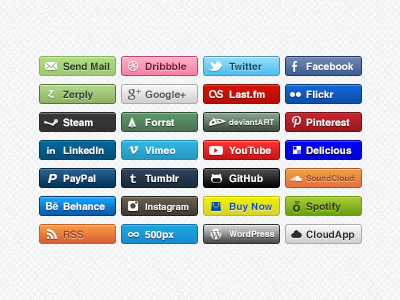
<style>
.page{position:relative;width:400px;height:300px}
.page>*{position:absolute;margin:0}
.t1{font:10px "Helvetica-Bold";color:#2a351d}
.t2{font:10px "Helvetica-Bold";letter-spacing:0.01em;color:#73102e}
.t3{font:10px "Helvetica-Bold";letter-spacing:0.01em;color:#064c68}
.t4{font:10px "Helvetica-Bold";letter-spacing:0.01em;color:#ffffff}
.t5{font:10px "Helvetica-Bold";color:#363d2d}
.t6{font:10px "Helvetica-Bold";letter-spacing:0.01em;color:#555555}
.t7{font:10px "Helvetica-Bold";color:#ffffff}
.t8{font:8px "Helvetica-Bold";letter-spacing:0.01em;color:#fefefe}
.t9{font:10px "Helvetica-Bold";letter-spacing:0.01em;color:#fefefe}
.t10{font:8px "Helvetica-Bold";letter-spacing:0.01em;color:#883f21}
.t11{font:9px "Helvetica-Bold";letter-spacing:0.01em;color:#ffffff}
.t12{font:10px "Helvetica-Bold";letter-spacing:0.01em;color:#0c4fa7}
.t13{font:10px "Helvetica-Bold";letter-spacing:0.01em;color:#2a351d}
.t14{font:10px "Helvetica-Bold";color:#a24a1d}
.t15{font:8.5px "Helvetica-Bold";letter-spacing:0.01em;color:#ffffff}
.t16{font:10px "Helvetica-Bold";letter-spacing:0.01em;color:#2c2c2c}
</style>
<div class="page">
<p class="t1" style="left:63px;top:62px;width:47px;height:9px">Send Mail</p>
<p class="t2" style="left:145px;top:62px;width:42px;height:8px">Dribbble</p>
<p class="t3" style="left:229px;top:62px;width:33px;height:8px">Twitter</p>
<p class="t4" style="left:306px;top:62px;width:48px;height:8px">Facebook</p>
<p class="t5" style="left:63px;top:90px;width:30px;height:10px">Zerply</p>
<p class="t6" style="left:145px;top:90px;width:41px;height:10px">Google+</p>
<p class="t4" style="left:229px;top:90px;width:36px;height:8px">Last.fm</p>
<p class="t4" style="left:306px;top:90px;width:28px;height:8px">Flickr</p>
<p class="t7" style="left:63px;top:118px;width:30px;height:9px">Steam</p>
<p class="t4" style="left:145px;top:118px;width:29px;height:8px">Forrst</p>
<p class="t8" style="left:229px;top:119px;width:45px;height:6px">deviantART</p>
<p class="t4" style="left:306px;top:118px;width:44px;height:8px">Pinterest</p>
<p class="t7" style="left:63px;top:146px;width:41px;height:8px">LinkedIn</p>
<p class="t4" style="left:145px;top:146px;width:31px;height:8px">Vimeo</p>
<p class="t9" style="left:229px;top:146px;width:42px;height:8px">YouTube</p>
<p class="t4" style="left:306px;top:146px;width:46px;height:8px">Delicious</p>
<p class="t7" style="left:63px;top:174px;width:33px;height:10px">PayPal</p>
<p class="t4" style="left:145px;top:174px;width:34px;height:8px">Tumblr</p>
<p class="t9" style="left:229px;top:174px;width:34px;height:9px">GitHub</p>
<p class="t10" style="left:306px;top:175px;width:48px;height:6px">SoundCloud</p>
<p class="t7" style="left:63px;top:202px;width:42px;height:8px">Behance</p>
<p class="t11" style="left:145px;top:203px;width:44px;height:9px">Instagram</p>
<p class="t12" style="left:229px;top:202px;width:44px;height:10px">Buy Now</p>
<p class="t13" style="left:306px;top:202px;width:35px;height:10px">Spotify</p>
<p class="t14" style="left:63px;top:230px;width:21px;height:9px">RSS</p>
<p class="t4" style="left:145px;top:231px;width:29px;height:9px">500px</p>
<p class="t15" style="left:229px;top:230px;width:46px;height:7px">WordPress</p>
<p class="t16" style="left:306px;top:230px;width:49px;height:10px">CloudApp</p>
</div>
